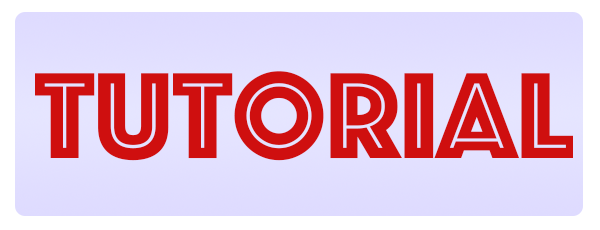
<style>
.page{position:relative;width:600px;height:230px}
.page>*{position:absolute;margin:0}
.t1{font:127px "Phosphate-Inline";color:#cf0f0f}
</style>
<div class="page">
<p class="t1" style="left:35px;top:71px;width:538px;height:90px">tutorial</p>
</div>
